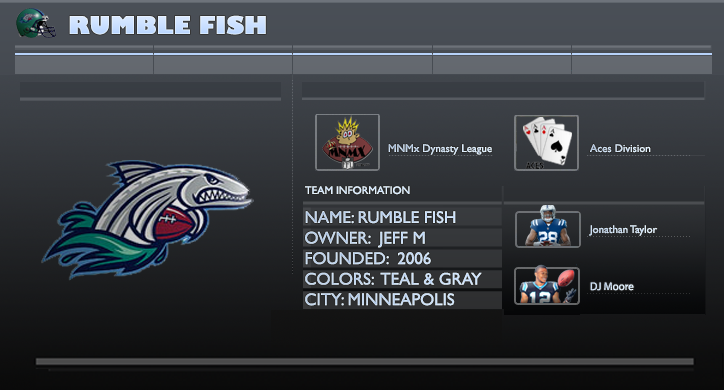
<style>
.page{position:relative;width:724px;height:390px}
.page>*{position:absolute;margin:0}
.t1{font:24px "GillSans-UltraBold";color:#d0e3ff}
.t2{font:11px "GillSansMT";color:#d6e7f8}
.t3{font:11px "GillSansMT";color:#d8e9f9}
.t4{font:11px "GillSansMT";color:#deeeff}
.t5{font:17.1px "GillSansMT";color:#bad6ff}
.t6{font:11px "GillSansMT";color:#d2e3f7}
.t7{font:11px "MyriadPro-Regular";color:#d1e5f7}
</style>
<div class="page">
<p class="t1" style="left:69px;top:15px;width:197px;height:20px">RUMBLE FISH</p>
<p class="t2" style="left:388px;top:144px;width:104px;height:11px">MNMx Dynasty League</p>
<p class="t3" style="left:590px;top:144px;width:61px;height:9px">Aces Division</p>
<p class="t4" style="left:305px;top:186px;width:105px;height:9px">TEAM INFORMATION</p>
<p class="t5" style="left:305px;top:211px;width:177px;height:95px">NAME: RUMBLE FISH<br>OWNER:  JEFF M<br>FOUNDED:  2006<br>COLORS:  TEAL &amp; GRAY<br>CITY: MINNEAPOLIS</p>
<p class="t6" style="left:589px;top:225px;width:69px;height:11px">Jonathan Taylor</p>
<p class="t7" style="left:590px;top:282px;width:44px;height:9px">DJ Moore</p>
</div>
